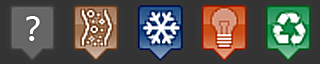
<style>
.page{position:relative;width:320px;height:64px;background:#333333}
.page>*{position:absolute;margin:0}
.t1{font:40px "EstrangeloEdessa";color:#ffffff}
</style>
<div class="page">
<p class="t1" style="left:26px;top:16px;width:14px;height:25px">?</p>
</div>
